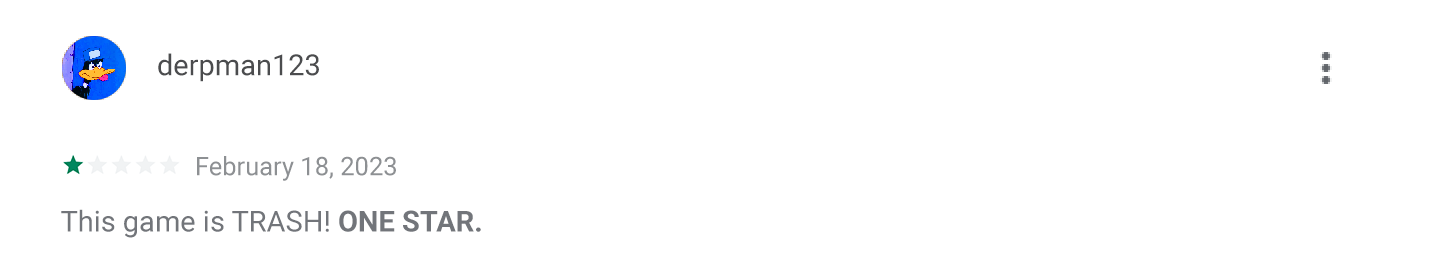
<style>
.page{position:relative;width:1438px;height:272px;background:#ffffff}
.page>*{position:absolute;margin:0}
.t1{font:29px "Roboto-Regular";color:#4b4c4e}
.t2{font:25.5px "Roboto-Regular";color:#8d9093}
.t3{font:29px "Roboto-Regular";color:#72757a}
.t4{font:29px "Roboto-Bold";color:#72757a}
</style>
<div class="page">
<p class="t1" style="left:158px;top:53px;width:161px;height:29px">derpman123</p>
<p class="t2" style="left:197px;top:156px;width:199px;height:25px">February 18, 2023</p>
<p class="t3" style="left:61px;top:209px;width:420px;height:29px">This game is TRASH! <span class="t4">ONE STAR.</span></p>
</div>
